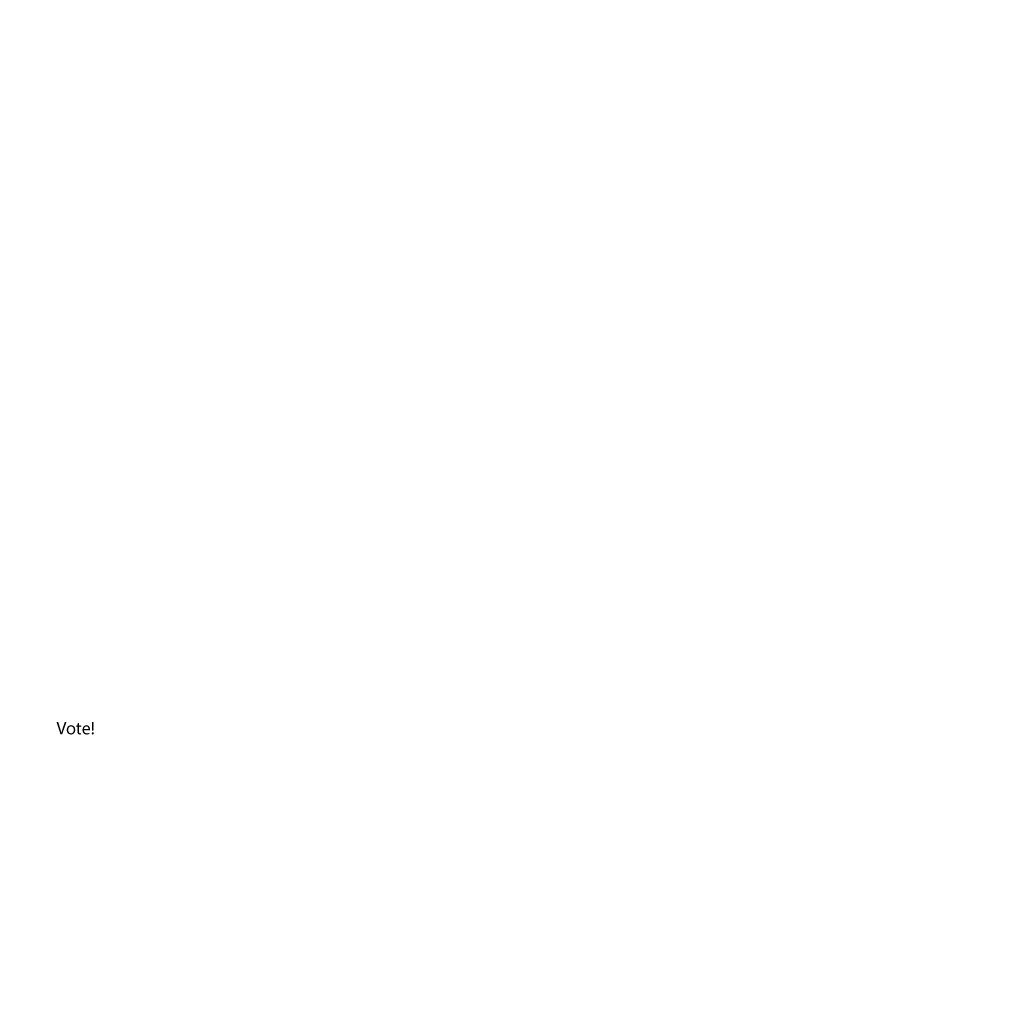
<style>
.page{position:relative;width:1020px;height:1020px;background:#ffffff}
.page>*{position:absolute;margin:0}
.t1{font:18px "MyriadPro-Regular";color:#000000}
</style>
<div class="page">
<p class="t1" style="left:56px;top:722px;width:38px;height:13px">Vote!</p>
</div>
